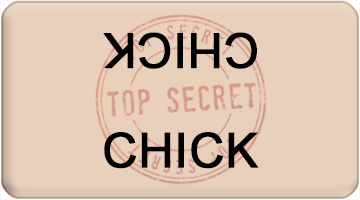
<style>
.page{position:relative;width:360px;height:200px;background:#e8d0bb}
.page>*{position:absolute;margin:0}
.t1{font:48px "ArialMT";color:#000000;font-weight:bold}
</style>
<div class="page">
<p class="t1" style="left:103px;top:32px;width:154px;height:37px;rotate:180deg">CHICK</p>
<p class="t1" style="left:104px;top:132px;width:155px;height:37px">CHICK</p>
</div>
